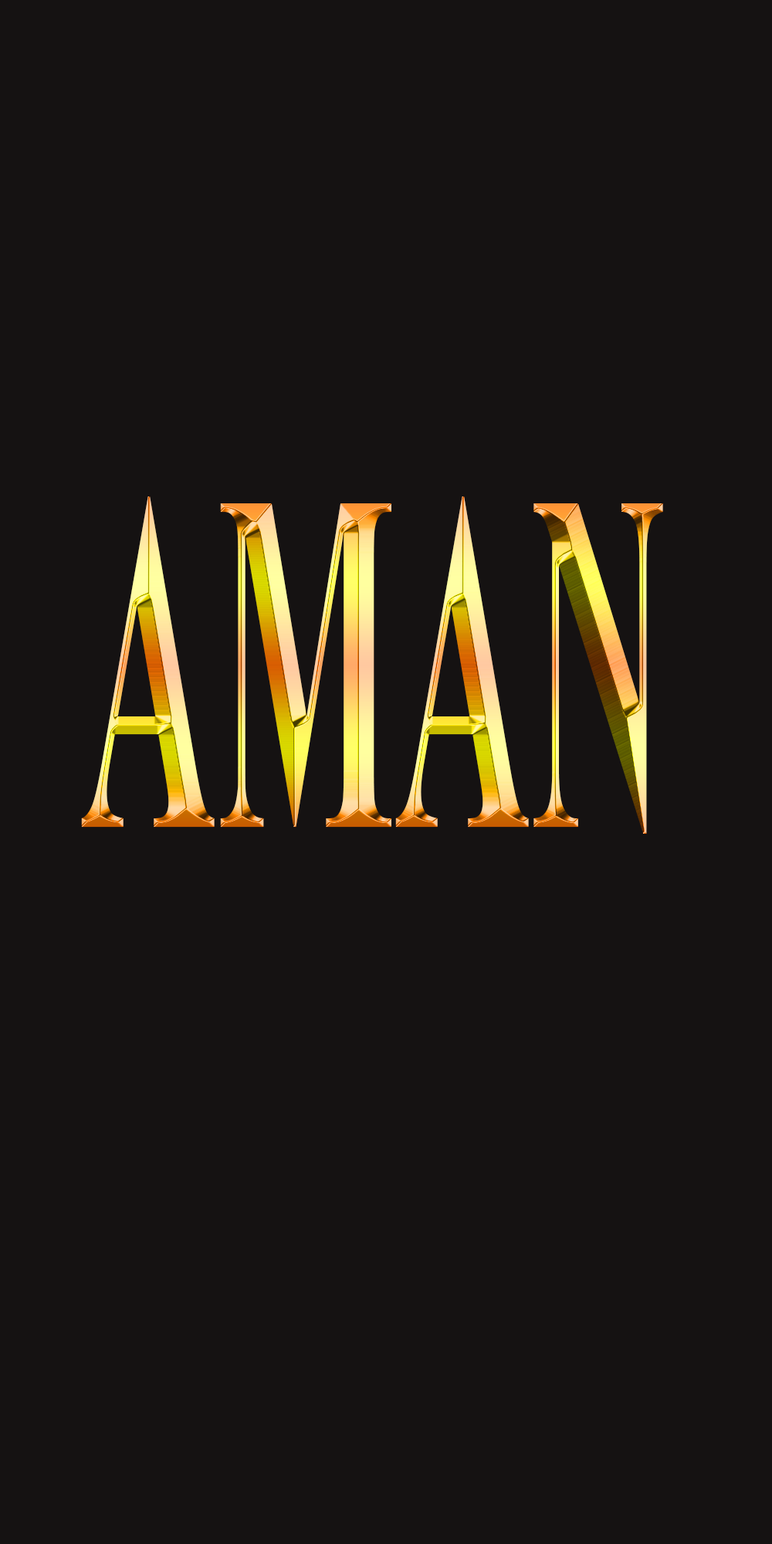
<style>
.page{position:relative;width:772px;height:1544px;background:#151212}
.page>*{position:absolute;margin:0}
.t1{font:488.3px "TimesNewRomanPS-BoldMT";scale:0.39 1}
</style>
<div class="page">
<p class="t1" style="left:81px;top:496px;width:582px;height:338px">AMAN</p>
</div>
